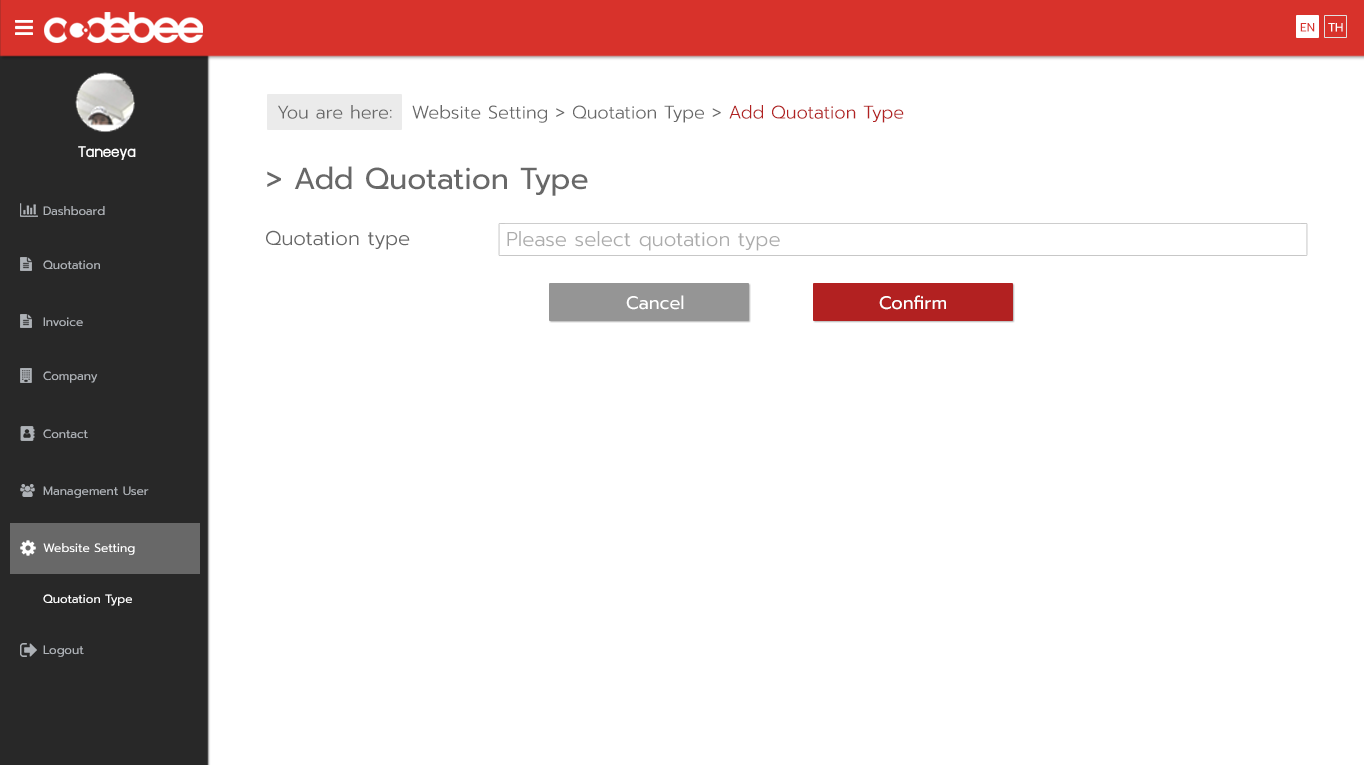
<style>
.page{position:relative;width:1364px;height:765px;background:#ffffff}
.page>*{position:absolute;margin:0}
.t1{font:12px "Prompt-Regular";color:#d8322b}
.t2{font:12px "Prompt-Regular";color:#ffffff}
.t3{font:18px "Prompt-Light";color:#686868}
.t4{font:18px "Prompt-Light";color:#b22121}
.t5{font:18px "supermarket";color:#ffffff}
.t6{font:30px "Prompt-Regular";color:#686868}
.t7{font:12px "Prompt-Regular";color:#aeb2b7}
.t8{font:20px "Prompt-Light";color:#686868}
.t9{font:20px "Prompt-Light";color:#acacac}
.t10{font:18px "Prompt-Regular";color:#ffffff}
</style>
<div class="page">
<p class="t1" style="left:1300px;top:23px;width:15px;height:9px">EN</p>
<p class="t2" style="left:1328px;top:23px;width:15px;height:9px">TH</p>
<p class="t3" style="left:278px;top:105px;width:114px;height:14px">You are here:</p>
<p class="t3" style="left:412px;top:105px;width:492px;height:18px">Website Setting &gt; Quotation Type &gt; <span class="t4">Add Quotation Type</span></p>
<p class="t5" style="left:78px;top:146px;width:58px;height:14px">Taneeya</p>
<p class="t6" style="left:267px;top:166px;width:321px;height:30px">&gt; Add Quotation Type</p>
<p class="t7" style="left:43px;top:206px;width:62px;height:10px">Dashboard</p>
<p class="t8" style="left:266px;top:230px;width:144px;height:20px">Quotation type</p>
<p class="t9" style="left:507px;top:231px;width:273px;height:20px">Please select quotation type</p>
<p class="t7" style="left:43px;top:260px;width:57px;height:10px">Quotation</p>
<p class="t10" style="left:626px;top:295px;width:58px;height:15px">Cancel</p>
<p class="t10" style="left:879px;top:295px;width:67px;height:15px">Confirm</p>
<p class="t7" style="left:43px;top:317px;width:40px;height:10px">Invoice</p>
<p class="t7" style="left:43px;top:371px;width:55px;height:12px">Company</p>
<p class="t7" style="left:43px;top:429px;width:45px;height:10px">Contact</p>
<p class="t7" style="left:43px;top:486px;width:106px;height:12px">Management User</p>
<p class="t2" style="left:43px;top:543px;width:92px;height:12px">Website Setting</p>
<p class="t2" style="left:43px;top:594px;width:89px;height:12px">Quotation Type</p>
<p class="t7" style="left:43px;top:645px;width:41px;height:12px">Logout</p>
</div>
